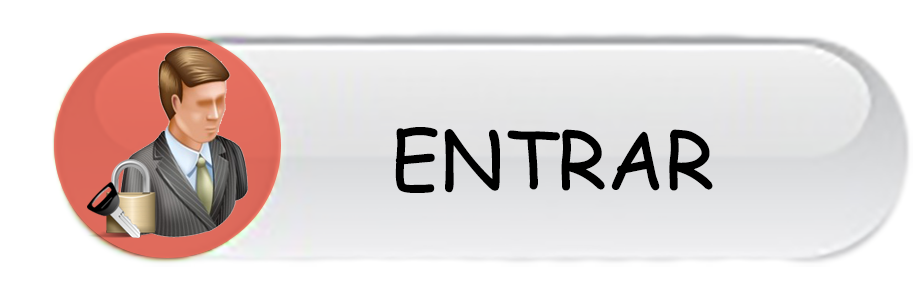
<style>
.page{position:relative;width:921px;height:308px;background:#ffffff}
.page>*{position:absolute;margin:0}
.t1{font:79.2px "ComicSansMS";color:#000000}
</style>
<div class="page">
<p class="t1" style="left:395px;top:127px;width:318px;height:66px">ENTRAR</p>
</div>
